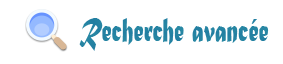
<style>
.page{position:relative;width:283px;height:64px;background:#ffffff}
.page>*{position:absolute;margin:0}
.t1{font:35.8px "MaturaMTScriptCapitals";color:#2583a3;scale:0.67 1}
</style>
<div class="page">
<p class="t1" style="left:79px;top:18px;width:190px;height:33px">Recherche avancée</p>
</div>
